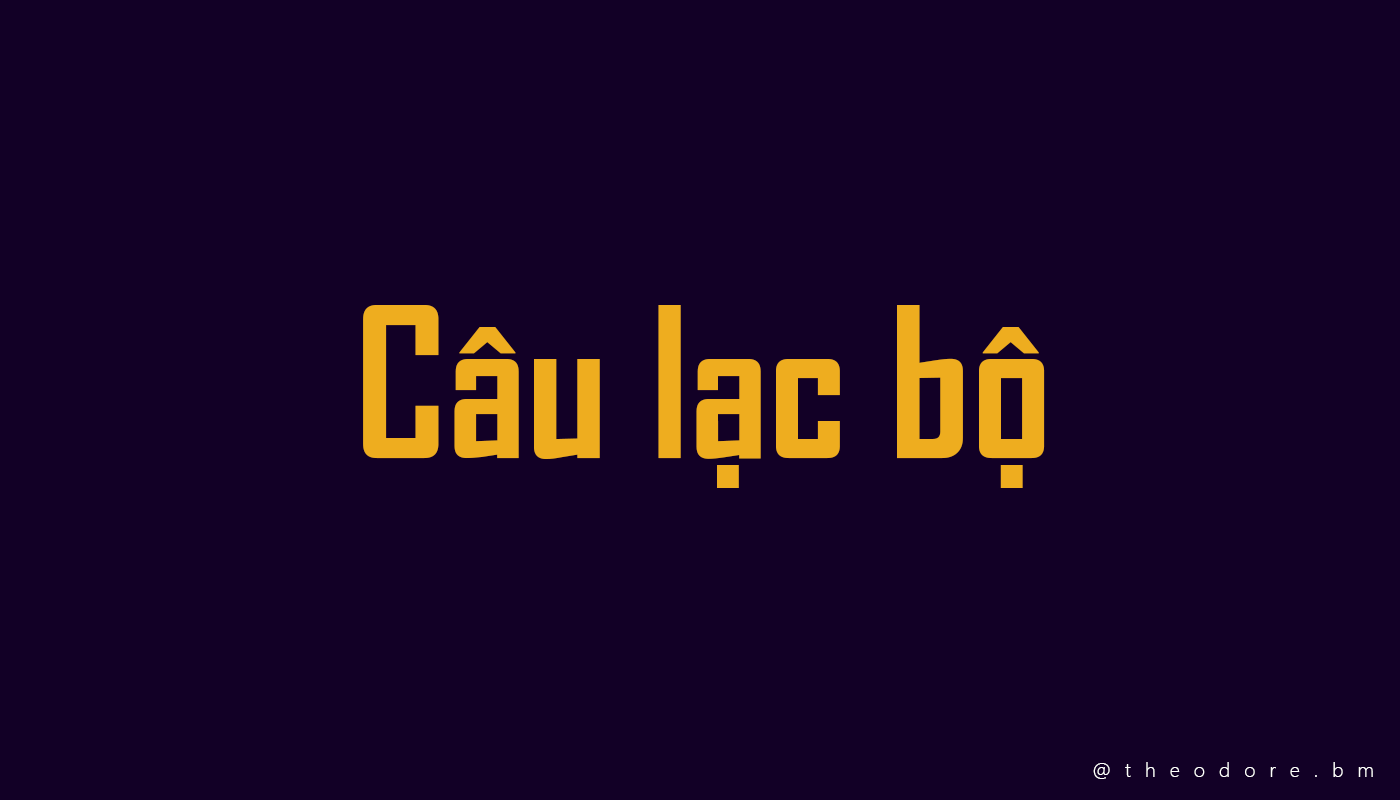
<style>
.page{position:relative;width:1400px;height:800px;background:#120026}
.page>*{position:absolute;margin:0}
.t1{font:200px "SVN-AgencyFBbold";color:#eead1f}
.t2{font:20px "SegoeUI-Light";letter-spacing:0.7em;color:#ffffff}
</style>
<div class="page">
<p class="t1" style="left:363px;top:305px;width:682px;height:183px">Câu lạc bộ</p>
<p class="t2" style="left:1093px;top:762px;width:280px;height:17px">@theodore.bm</p>
</div>
